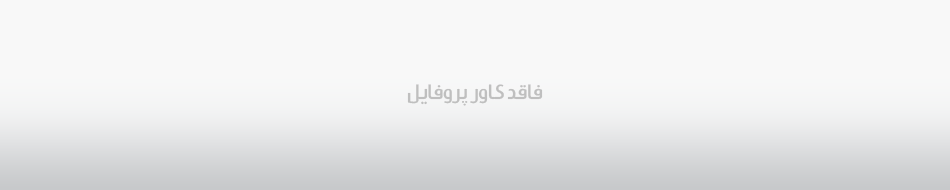
<style>
.page{position:relative;width:950px;height:190px;background:#f8f8f8}
.page>*{position:absolute;margin:0}
.t1{font:20.5px "Mj_AramcoLight";color:#cccccc}
</style>
<div class="page">
<p class="t1" style="left:407px;top:84px;width:136px;height:22px">فاقد کاور پروفايل</p>
</div>
